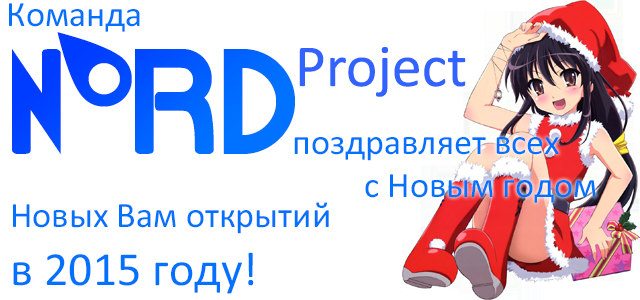
<style>
.page{position:relative;width:640px;height:300px;background:#ffffff}
.page>*{position:absolute;margin:0}
.t1{font:36px "Calibri";color:#0072ff}
.t2{font:150px "NORDLogoFont"}
.t3{font:60px "Calibri";color:#3363ff}
.t4{font:48px "Calibri";color:#0072ff}
</style>
<div class="page">
<p class="t1" style="left:9px;top:3px;width:131px;height:29px">Команда</p>
<p class="t2" style="left:12px;top:32px;width:283px;height:122px">NORD</p>
<p class="t3" style="left:299px;top:47px;width:167px;height:50px">Project</p>
<p class="t1" style="left:294px;top:137px;width:302px;height:66px">поздравляет всех<br>  с Новым годом</p>
<p class="t1" style="left:13px;top:202px;width:316px;height:92px">Новых Вам открытий<br><span class="t4">в 2015 году!</span></p>
</div>
